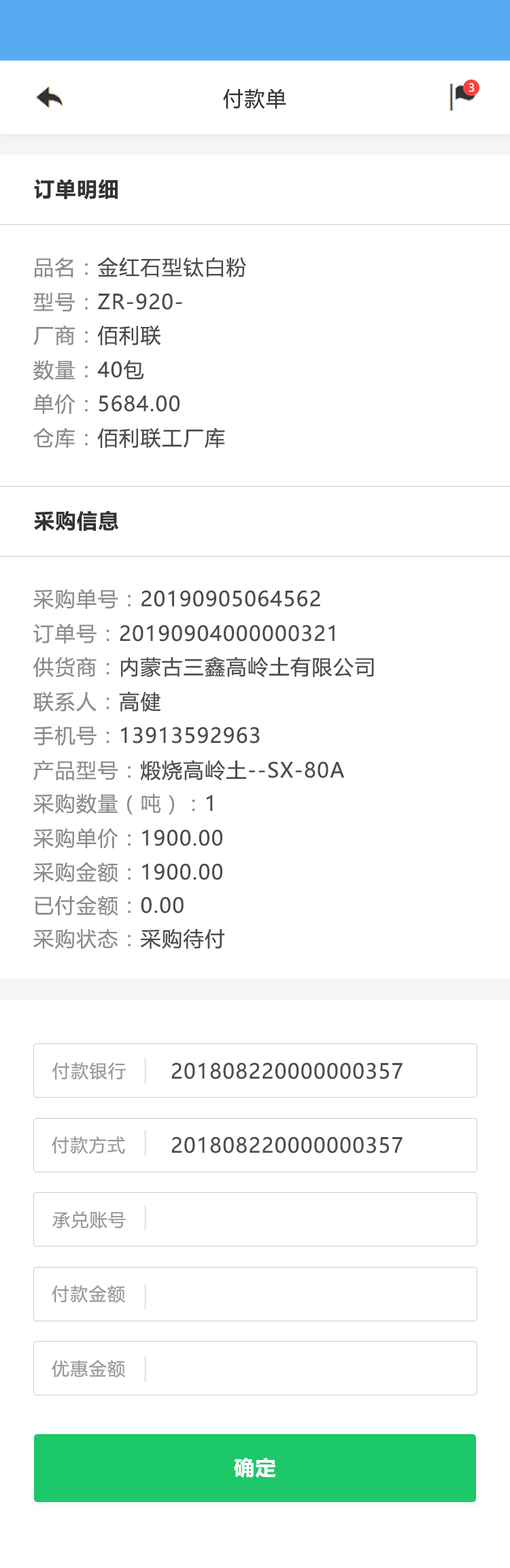
<style>
.page{position:relative;width:510px;height:1568px;background:#ffffff}
.page>*{position:absolute;margin:0}
.t1{font:20.4px "MicrosoftYaHeiUI";letter-spacing:0.05em;color:#333333}
.t2{font:10.9px "MicrosoftYaHeiUI";color:#ffffff}
.t3{font:20.4px "MicrosoftYaHeiUI-Bold";letter-spacing:0.05em;color:#333333}
.t4{font:20.4px "MicrosoftYaHeiUI";letter-spacing:0.05em;color:#4c4c4c}
.t5{font:20.4px "MicrosoftYaHeiUI";letter-spacing:0.05em;color:#8c8c8c}
.t6{font:17.7px "MicrosoftYaHeiUI";letter-spacing:0.05em;color:#999999}
.t7{font:20.4px "MicrosoftYaHeiUI-Bold";letter-spacing:0.05em;color:#ffffff}
</style>
<div class="page">
<p class="t1" style="left:223px;top:88px;width:63px;height:21px">付款单</p>
<p class="t2" style="left:468px;top:83px;width:6px;height:9px">3</p>
<p class="t3" style="left:34px;top:179px;width:84px;height:21px">订单明细</p>
<p class="t4" style="left:35px;top:257px;width:211px;height:20px"><span class="t5">品名：</span>金红石型钛白粉</p>
<p class="t4" style="left:33px;top:292px;width:149px;height:20px"><span class="t5">型号：</span>ZR-920-</p>
<p class="t5" style="left:33px;top:325px;width:128px;height:20px">厂商：<span class="t4">佰利联</span></p>
<p class="t5" style="left:33px;top:360px;width:111px;height:21px">数量：<span class="t4">40包</span></p>
<p class="t4" style="left:33px;top:394px;width:146px;height:21px"><span class="t5">单价：</span>5684.00</p>
<p class="t4" style="left:33px;top:428px;width:192px;height:21px"><span class="t5">仓库：</span>佰利联工厂库</p>
<p class="t3" style="left:34px;top:510px;width:85px;height:21px">采购信息</p>
<p class="t4" style="left:33px;top:589px;width:287px;height:20px"><span class="t5">采购单号：</span>20190905064562</p>
<p class="t4" style="left:33px;top:623px;width:301px;height:21px"><span class="t5">订单号：</span>20190904000000321</p>
<p class="t4" style="left:33px;top:657px;width:341px;height:21px"><span class="t5">供货商：</span>内蒙古三鑫高岭土有限公司</p>
<p class="t5" style="left:33px;top:691px;width:128px;height:21px">联系人：<span class="t4">高健</span></p>
<p class="t4" style="left:33px;top:726px;width:227px;height:20px"><span class="t5">手机号：</span>13913592963</p>
<p class="t4" style="left:33px;top:760px;width:312px;height:21px"><span class="t5">产品型号：</span>煅烧高岭土--SX-80A</p>
<p class="t5" style="left:33px;top:794px;width:180px;height:21px">采购数量（吨）：<span class="t4">1</span></p>
<p class="t4" style="left:33px;top:828px;width:189px;height:21px"><span class="t5">采购单价：</span>1900.00</p>
<p class="t4" style="left:33px;top:862px;width:189px;height:21px"><span class="t5">采购金额：</span>1900.00</p>
<p class="t5" style="left:35px;top:895px;width:149px;height:21px">已付金额：<span class="t4">0.00</span></p>
<p class="t5" style="left:33px;top:928px;width:192px;height:21px">采购状态：<span class="t4">采购待付</span></p>
<p class="t6" style="left:52px;top:1062px;width:74px;height:18px">付款银行</p>
<p class="t4" style="left:171px;top:1062px;width:231px;height:17px">201808220000000357</p>
<p class="t6" style="left:52px;top:1136px;width:73px;height:18px">付款方式</p>
<p class="t4" style="left:171px;top:1136px;width:231px;height:17px">201808220000000357</p>
<p class="t6" style="left:52px;top:1211px;width:74px;height:18px">承兑账号</p>
<p class="t6" style="left:52px;top:1285px;width:73px;height:18px">付款金额</p>
<p class="t6" style="left:52px;top:1360px;width:73px;height:18px">优惠金额</p>
<p class="t7" style="left:234px;top:1457px;width:42px;height:21px">确定</p>
</div>
